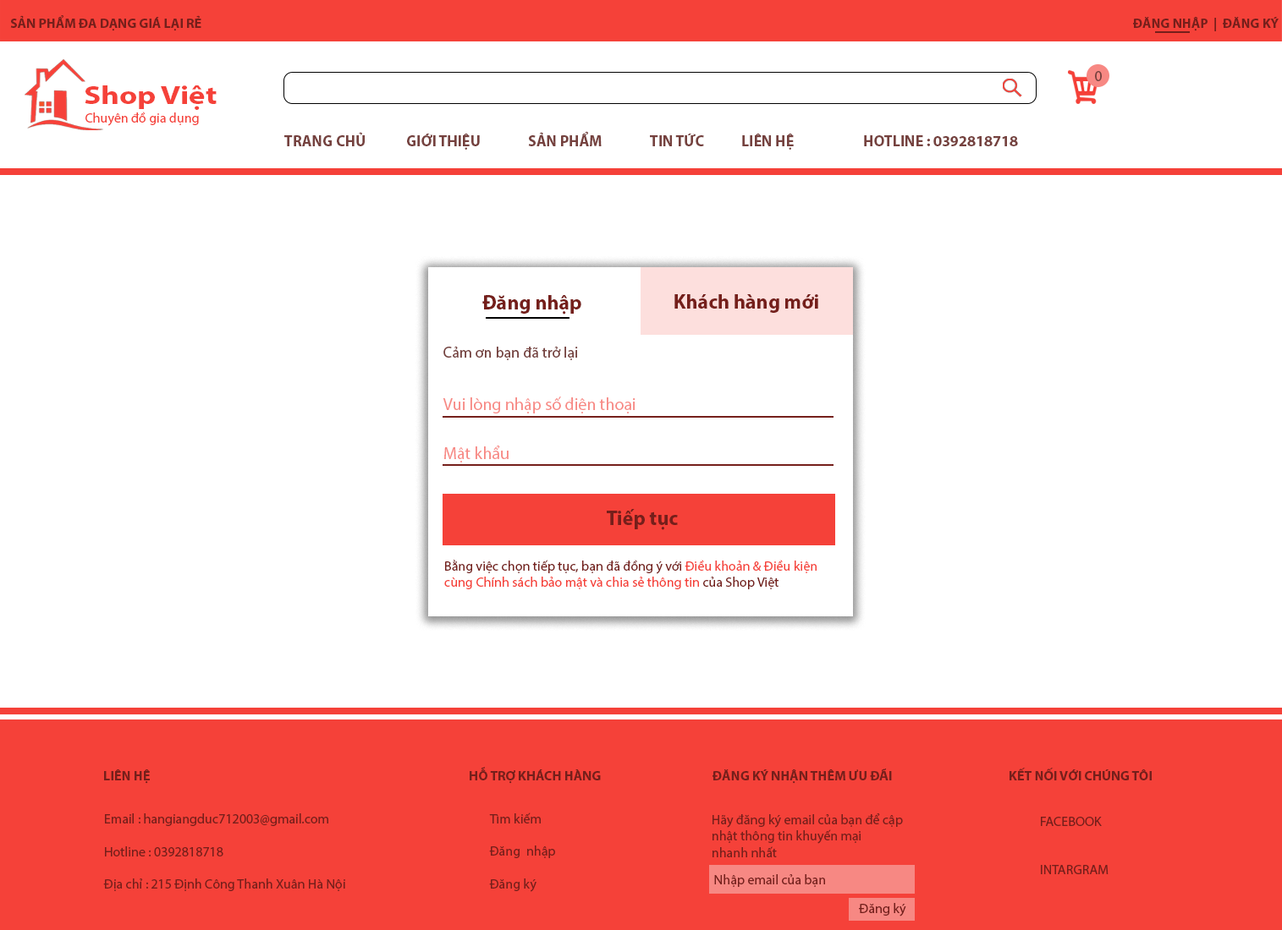
<style>
.page{position:relative;width:1282px;height:930px;background:#ffffff}
.page>*{position:absolute;margin:0}
.t1{font:13.5px "MyriadPro-Bold";color:#751f1b}
.t2{font:15.2px "MyriadPro-Regular";color:#75413e}
.t3{font:26.4px "MyriadPro-Bold";color:#f54139;scale:1.19 1}
.t4{font:13.5px "MyriadPro-Regular";color:#f54139}
.t5{font:13.5px "MyriadPro-Regular";color:#ffffff}
.t6{font:15.2px "MyriadPro-Bold";color:#75413e}
.t7{font:20.3px "MyriadPro-Bold";color:#751f1b}
.t8{font:16.9px "MyriadPro-Regular";color:#f78883}
.t9{font:13.5px "MyriadPro-Regular";color:#751f1b}
.t10{font:13.5px "MyriadPro-Bold";color:#751f1b;text-transform:uppercase}
</style>
<div class="page">
<p class="t1" style="left:10px;top:15px;width:191px;height:16px">SẢN PHẨM ĐA DẠNG GIÁ LẠI RẺ</p>
<p class="t1" style="left:1133px;top:17px;width:145px;height:14px">ĐĂNG NHẬP  |  ĐĂNG KÝ</p>
<p class="t2" style="left:1095px;top:71px;width:6px;height:10px">0</p>
<p class="t3" style="left:85px;top:85px;width:132px;height:25px">Shop Việt</p>
<p class="t4" style="left:80px;top:112px;width:119px;height:14px"><span class="t5">s</span>Chuyên đồ gia dụng</p>
<p class="t6" style="left:284px;top:131px;width:734px;height:19px">TRANG CHỦ   GIỚI THIỆU  SẢN PHẨM   TIN TỨC  LIÊN HỆ   HOTLINE : 0392818718</p>
<p class="t7" style="left:482px;top:295px;width:99px;height:20px">Đăng nhập</p>
<p class="t7" style="left:674px;top:294px;width:144px;height:19px">Khách hàng mới</p>
<p class="t2" style="left:443px;top:346px;width:135px;height:14px">Cảm ơn bạn đã trở lại</p>
<p class="t8" style="left:442px;top:397px;width:193px;height:17px">Vui lòng nhập số điện thoại</p>
<p class="t8" style="left:444px;top:446px;width:64px;height:17px">Mật khẩu</p>
<p class="t7" style="left:607px;top:509px;width:71px;height:21px">Tiếp tục</p>
<p class="t4" style="left:444px;top:560px;width:372px;height:30px"><span class="t9">Bằng việc chọn tiếp tục, bạn đã đồng ý với </span>Điều khoản &amp; Điều kiện cùng Chính sách bảo mật và chia sẻ thông tin <span class="t9">của Shop Việt</span></p>
<p class="t10" style="left:104px;top:767px;width:1047px;height:17px"><span class="t1">LIÊN HỆ             HỖ TRỢ KHÁCH HÀNG     </span>Đăng ký nhận thêm ưu đãi             Kết nối với chúng tôi</p>
<p class="t9" style="left:103px;top:814px;width:242px;height:78px">Email : hangiangduc712003@gmail.com<br><br>Hotline : 0392818718<br><br>Địa chỉ : 215 Định Công Thanh Xuân Hà Nội</p>
<p class="t9" style="left:489px;top:813px;width:66px;height:79px">Tìm kiếm<br><br>Đăng  nhập<br><br>Đăng ký</p>
<p class="t9" style="left:712px;top:814px;width:191px;height:44px">Hãy đăng ký email của bạn để cập <br>nhật thông tin khuyến mại<br>nhanh nhất</p>
<p class="t9" style="left:1040px;top:817px;width:68px;height:58px">FACEBOOK<br><br><br>INTARGRAM</p>
<p class="t9" style="left:714px;top:875px;width:111px;height:12px">Nhập email của bạn</p>
<p class="t9" style="left:859px;top:903px;width:47px;height:14px">Đăng ký</p>
</div>
